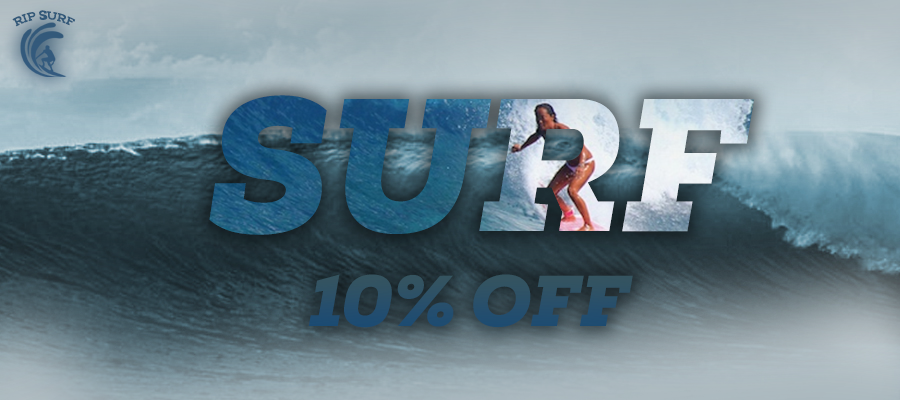
<style>
.page{position:relative;width:900px;height:400px}
.page>*{position:absolute;margin:0}
.t1{font:11.6px "NexaSlab-xBold";color:#335c86;scale:0.93 1}
.t2{font:188.3px "NexaSlabBlackItalic";scale:0.95 1}
.t3{font:72px "NexaSlabBlackItalic";color:#2b5069}
</style>
<div class="page">
<p class="t1" style="left:12px;top:10px;width:64px;height:17px">RIP SURF</p>
<p class="t2" style="left:209px;top:95px;width:546px;height:140px">SURF</p>
<p class="t3" style="left:308px;top:274px;width:325px;height:54px">10% OFF</p>
</div>
